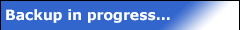
<style>
.page{position:relative;width:240px;height:30px;background:#3366cc}
.page>*{position:absolute;margin:0}
.t1{font:14px "Verdana-Bold";color:#ffffff}
</style>
<div class="page">
<p class="t1" style="left:6px;top:9px;width:164px;height:14px">Backup in progress...</p>
</div>
